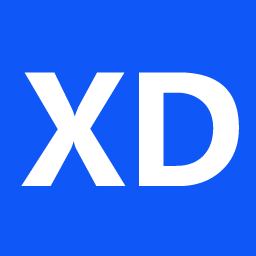
<style>
.page{position:relative;width:256px;height:256px;background:#1057f7}
.page>*{position:absolute;margin:0}
.t1{font:150px "MicrosoftYaHei-Bold";color:#ffffff}
</style>
<div class="page">
<p class="t1" style="left:21px;top:72px;width:218px;height:114px">XD</p>
</div>
